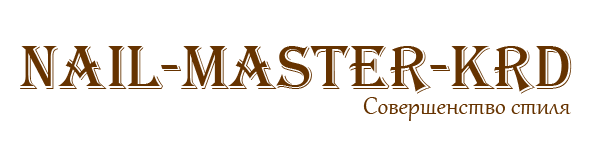
<style>
.page{position:relative;width:590px;height:150px;background:#ffffff}
.page>*{position:absolute;margin:0}
.t1{font:64px "Algerian";color:#663300}
.t2{font:30px "Gabriola";color:#663300}
</style>
<div class="page">
<p class="t1" style="left:20px;top:46px;width:552px;height:48px">Nail-Master-Krd</p>
<p class="t2" style="left:363px;top:97px;width:208px;height:24px">Совершенство стиля</p>
</div>
